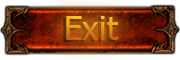
<style>
.page{position:relative;width:180px;height:60px}
.page>*{position:absolute;margin:0}
.t1{font:33.3px "Tahoma"}
</style>
<div class="page">
<p class="t1" style="left:66px;top:16px;width:52px;height:24px">Exit</p>
</div>
